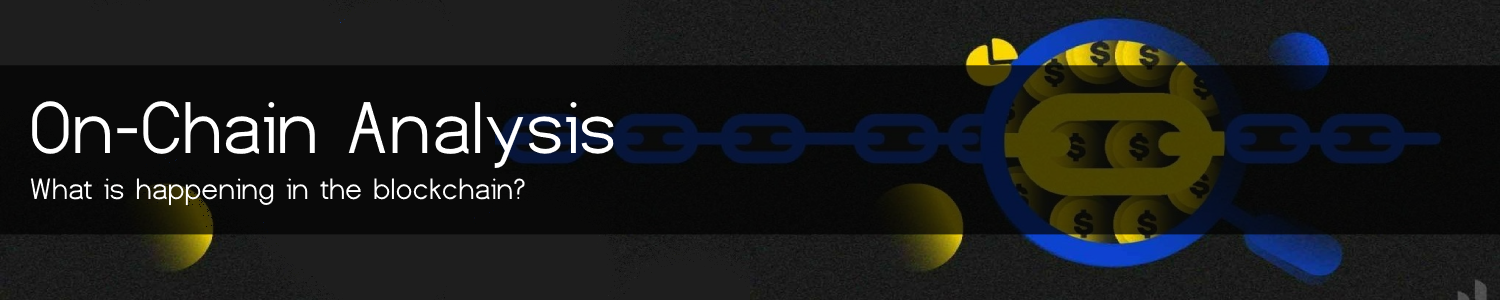
<style>
.page{position:relative;width:1500px;height:300px}
.page>*{position:absolute;margin:0}
.t1{font:77px "Dustismo";color:#ffffff}
.t2{font:31px "Dustismo";color:#ffffff}
</style>
<div class="page">
<p class="t1" style="left:32px;top:101px;width:582px;height:68px">On-Chain Analysis</p>
<p class="t2" style="left:30px;top:178px;width:495px;height:28px">What is happening in the blockchain?</p>
</div>
